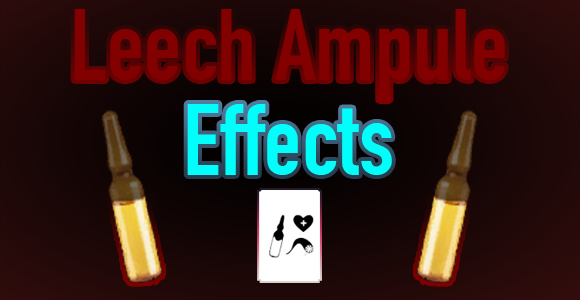
<style>
.page{position:relative;width:580px;height:300px}
.page>*{position:absolute;margin:0}
.t1{font:100px "DINEngschrift";color:#820000}
.t2{font:100px "DINEngschrift";color:#00fefb}
</style>
<div class="page">
<p class="t1" style="left:74px;top:9px;width:431px;height:91px">Leech Ampule</p>
<p class="t2" style="left:187px;top:104px;width:205px;height:71px">Effects</p>
</div>
